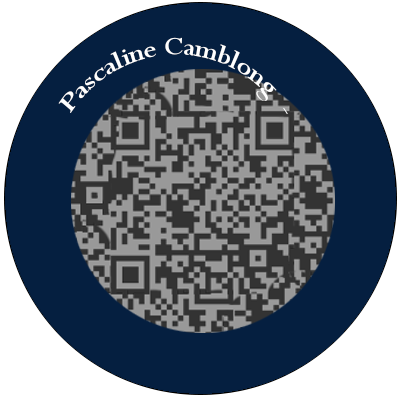
<style>
.page{position:relative;width:400px;height:400px;background:#051f40}
.page>*{position:absolute;margin:0}
.t1{font:28px "Perpetua";color:#ffffff;scale:0.9 1}
</style>
<div class="page">
<p class="t1" style="left:58px;top:37px;width:230px;height:78px;rotate:3deg">Pascaline Camblong  -</p>
</div>
